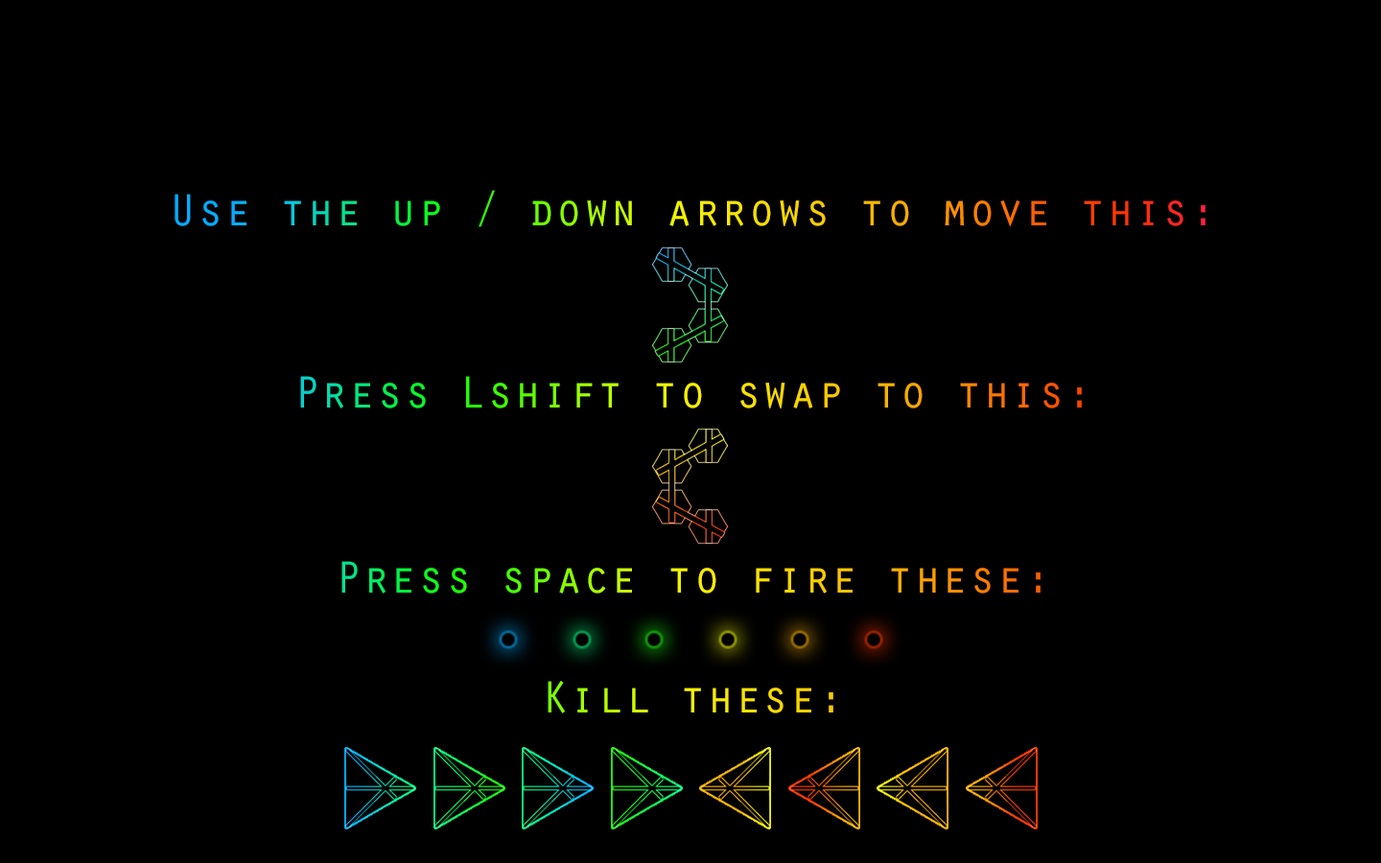
<style>
.page{position:relative;width:1381px;height:863px;background:#000000}
.page>*{position:absolute;margin:0}
.t1{font:46.4px "OratorStd"}
</style>
<div class="page">
<p class="t1" style="left:175px;top:190px;width:1031px;height:37px">Use the up / down arrows to move this:</p>
<p class="t1" style="left:300px;top:376px;width:782px;height:33px">Press Lshift to swap to this:</p>
<p class="t1" style="left:341px;top:561px;width:700px;height:33px">Press space to fire these:</p>
<p class="t1" style="left:548px;top:681px;width:286px;height:33px">Kill these:</p>
</div>
